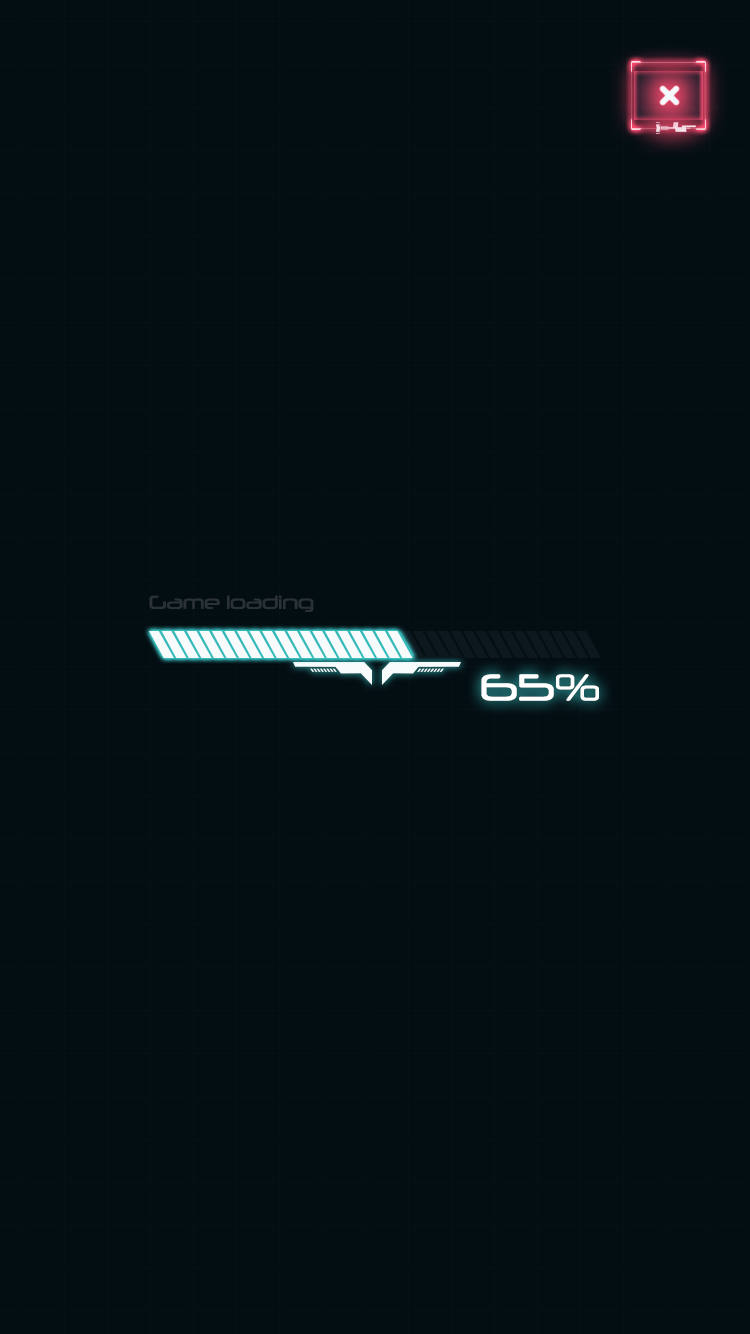
<style>
.page{position:relative;width:750px;height:1334px;background:#030e13}
.page>*{position:absolute;margin:0}
.t1{font:18.1px "Neuropol-Regular";color:#2b3235}
.t2{font:36.2px "Neuropol-Regular";color:#ffffff}
</style>
<div class="page">
<p class="t1" style="left:149px;top:595px;width:165px;height:17px">Game loading</p>
<p class="t2" style="left:481px;top:674px;width:118px;height:27px">65%</p>
</div>
